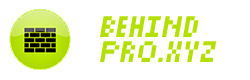
<style>
.page{position:relative;width:250px;height:80px;background:#ffffff}
.page>*{position:absolute;margin:0}
.t1{font:66.7px/25px "Pixels";color:#b3e001;font-style:italic}
</style>
<div class="page">
<p class="t1" style="left:100px;top:16px;width:117px;height:46px">BEHIND<br>PRO.XYZ</p>
</div>
